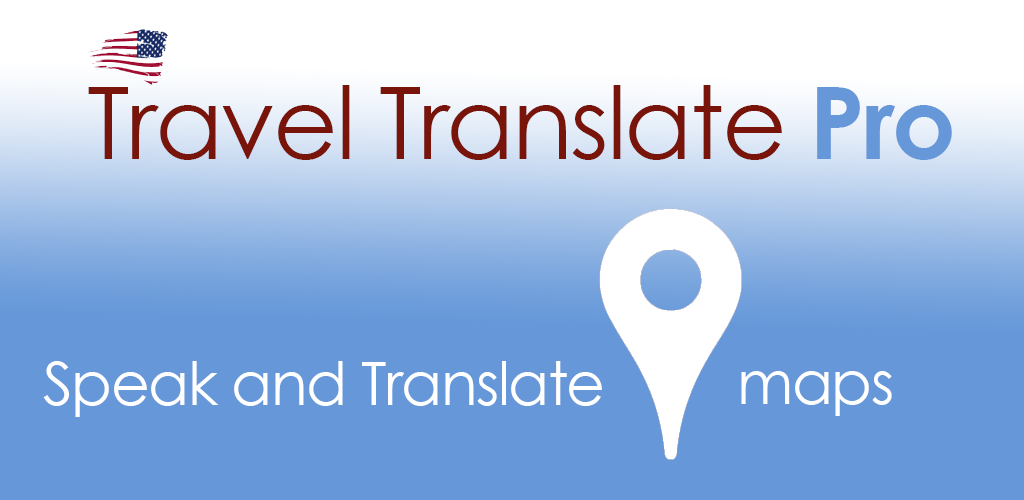
<style>
.page{position:relative;width:1024px;height:500px;background:#6698d9}
.page>*{position:absolute;margin:0}
.t1{font:100px "CenturyGothic";letter-spacing:-0.025em;color:#79140a}
.t2{font:100px "CenturyGothic-Bold";letter-spacing:-0.025em;color:#6698d9}
.t3{font:60px "CenturyGothic";letter-spacing:-0.025em;color:#ffffff}
</style>
<div class="page">
<p class="t1" style="left:88px;top:85px;width:864px;height:75px">Travel Translate <span class="t2">Pro</span></p>
<p class="t3" style="left:43px;top:361px;width:559px;height:56px">Speak and Translate</p>
<p class="t3" style="left:741px;top:371px;width:151px;height:45px">maps</p>
</div>
